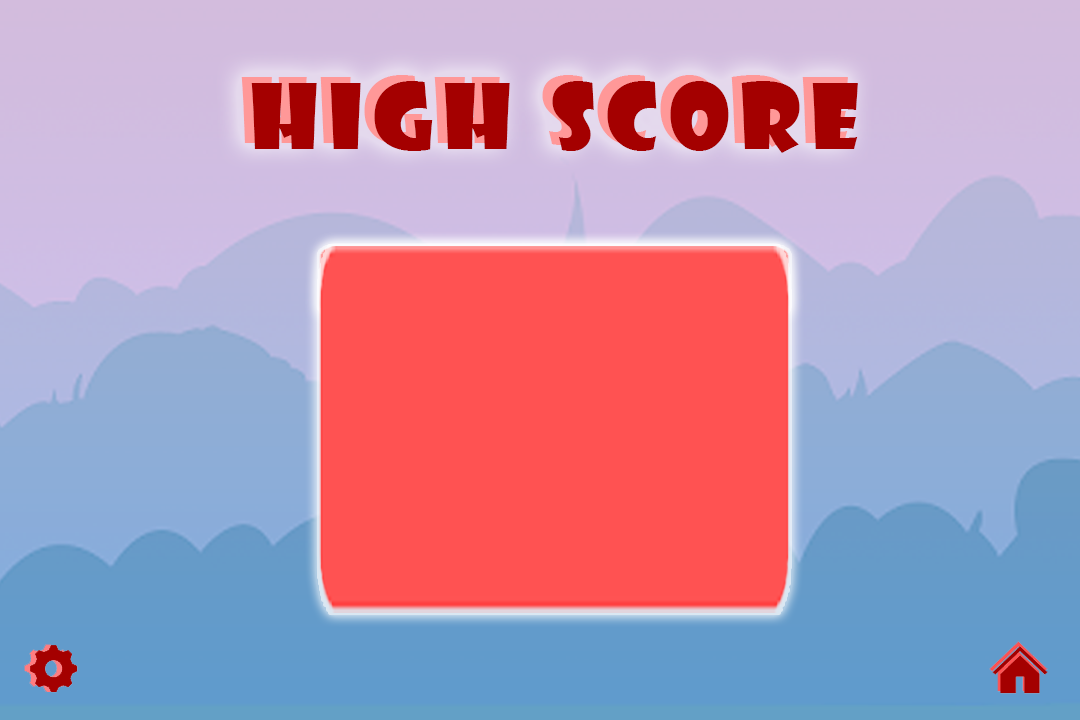
<style>
.page{position:relative;width:1080px;height:720px;background:#ff5252}
.page>*{position:absolute;margin:0}
.t1{font:87.5px "ShowcardGothic-Reg";letter-spacing:0.125em}
.t2{font:87.5px "ShowcardGothic-Reg";letter-spacing:0.125em;color:#a40000}
</style>
<div class="page">
<p class="t1" style="left:241px;top:75px;width:607px;height:72px">high score</p>
<p class="t2" style="left:251px;top:81px;width:607px;height:72px">high score</p>
</div>
